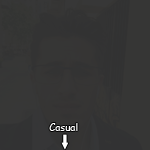
<style>
.page{position:relative;width:150px;height:150px;background:#363635}
.page>*{position:absolute;margin:0}
.t1{font:10px "ComicSansMS";color:#ffffff}
</style>
<div class="page">
<p class="t1" style="left:49px;top:123px;width:29px;height:8px">Casual</p>
</div>
